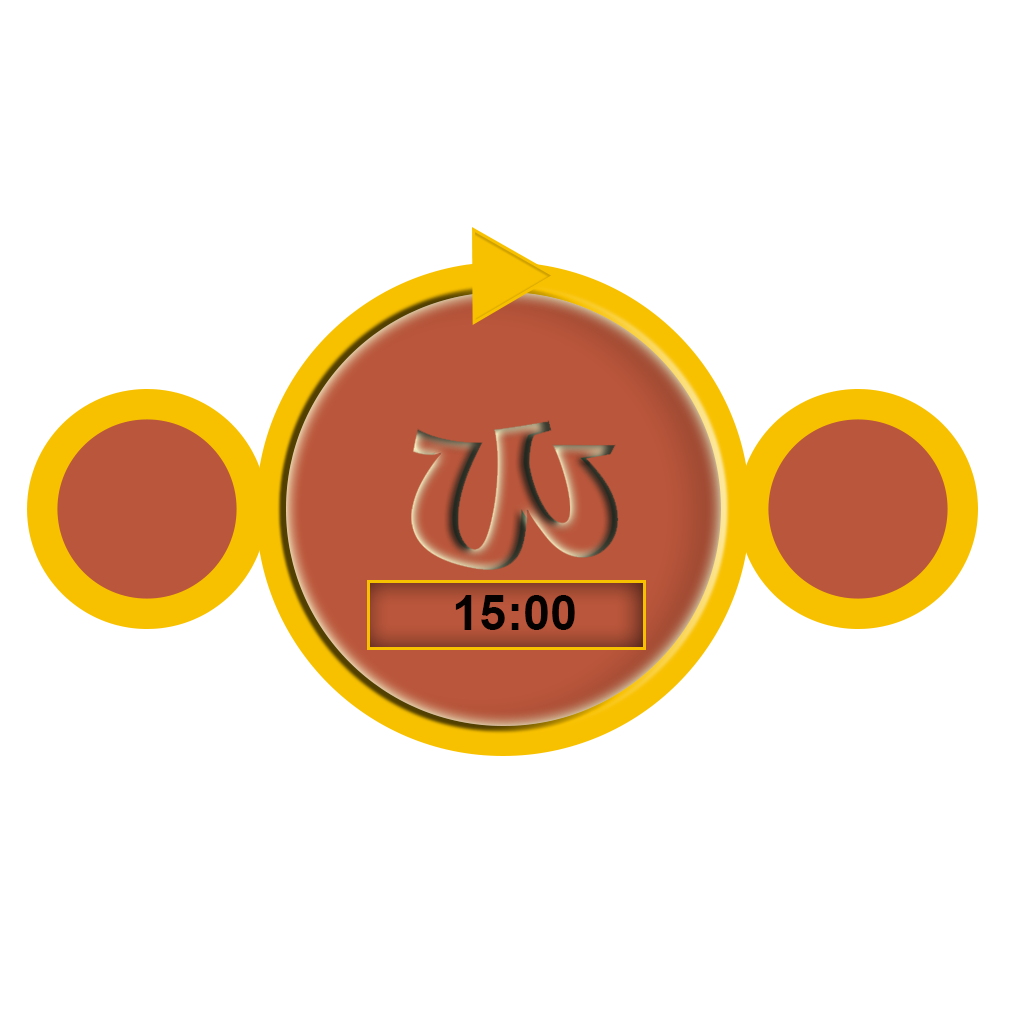
<style>
.page{position:relative;width:1024px;height:1024px;background:#ffffff}
.page>*{position:absolute;margin:0}
.t1{font:49.3px "Arial-BoldMT";color:#040100}
</style>
<div class="page">
<p class="t1" style="left:455px;top:595px;width:120px;height:35px">15:00</p>
</div>
